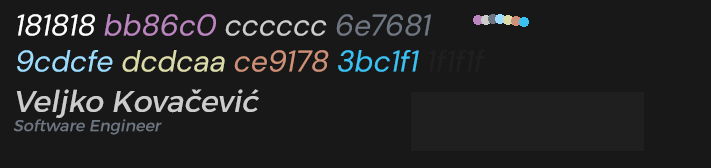
<style>
.page{position:relative;width:711px;height:168px;background:#181818}
.page>*{position:absolute;margin:0}
.t1{font:30px "DMSans-Regular";color:#ffffff;font-style:italic}
.t2{font:30px "DMSans-Regular";color:#bb86c0;font-style:italic}
.t3{font:30px "DMSans-Regular";color:#cccccc;font-style:italic}
.t4{font:30px "DMSans-Regular";color:#6e7681;font-style:italic}
.t5{font:30px "DMSans-Regular";color:#9cdcfe;font-style:italic}
.t6{font:30px "DMSans-Regular";color:#dcdcaa;font-style:italic}
.t7{font:30px "DMSans-Regular";color:#ce9178;font-style:italic}
.t8{font:30px "DMSans-Regular";color:#3bc1f1;font-style:italic}
.t9{font:30px "DMSans-Regular";color:#1f1f1f;font-style:italic}
.t10{font:16px "Alexandria-Regular";color:#6e7681;font-style:italic}
.t11{font:30px "Alexandria-Regular";color:#cccccc;font-style:italic}
</style>
<div class="page">
<p class="t1" style="left:17px;top:14px;width:468px;height:58px">181818 <span class="t2">bb86c0 </span><span class="t3">cccccc </span><span class="t4">6e7681<br></span><span class="t5">9cdcfe </span><span class="t6">dcdcaa </span><span class="t7">ce9178 </span><span class="t8">3bc1f1 </span><span class="t9">1f1f1f</span></p>
<p class="t10" style="left:13px;top:89px;width:246px;height:46px"><span class="t11">Veljko Kovačević<br></span>Software Engineer</p>
</div>
